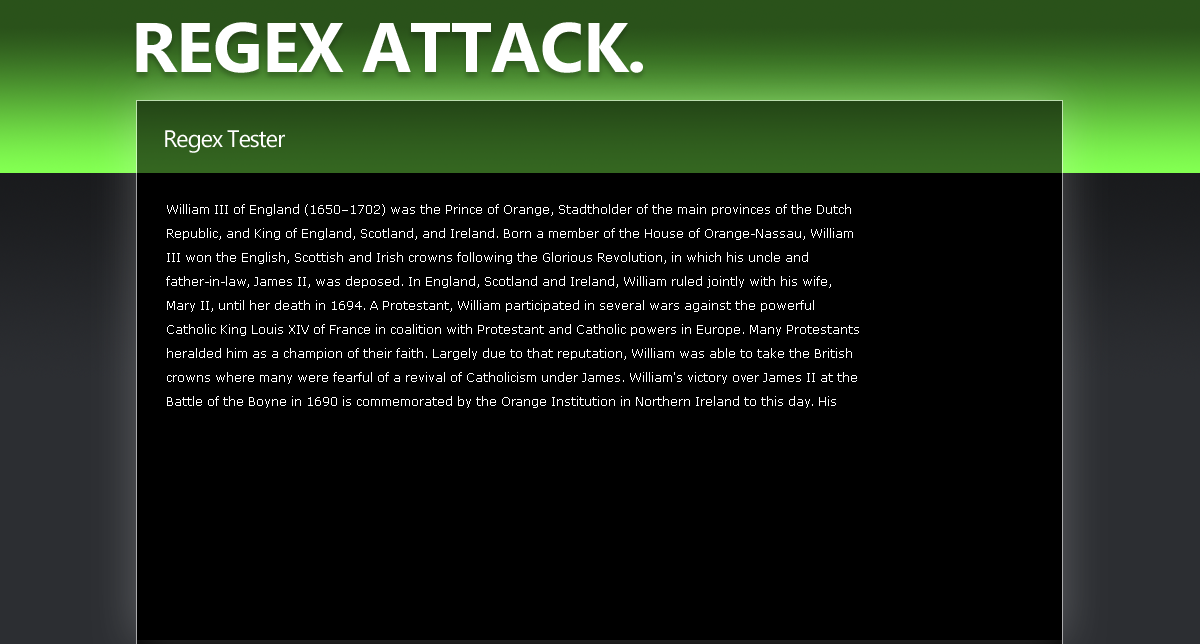
<style>
.page{position:relative;width:1200px;height:644px;background:#000000}
.page>*{position:absolute;margin:0}
.t1{font:70px "MicrosoftNewTaiLue-Bold";letter-spacing:-0.01em;color:#ffffff;text-transform:uppercase}
.t2{font:24px "MicrosoftNewTaiLue";letter-spacing:-0.05em;color:#ffffff}
.t3{font:12px/24px "Verdana";color:#ffffff}
</style>
<div class="page">
<p class="t1" style="left:136px;top:22px;width:507px;height:51px">Regex Attack.</p>
<p class="t2" style="left:165px;top:130px;width:120px;height:23px">Regex Tester</p>
<p class="t3" style="left:166px;top:204px;width:693px;height:204px">William III of England (1650–1702) was the Prince of Orange, Stadtholder of the main provinces of the Dutch<br>Republic, and King of England, Scotland, and Ireland. Born a member of the House of Orange-Nassau, William<br>III won the English, Scottish and Irish crowns following the Glorious Revolution, in which his uncle and<br>father-in-law, James II, was deposed. In England, Scotland and Ireland, William ruled jointly with his wife,<br>Mary II, until her death in 1694. A Protestant, William participated in several wars against the powerful<br>Catholic King Louis XIV of France in coalition with Protestant and Catholic powers in Europe. Many Protestants<br>heralded him as a champion of their faith. Largely due to that reputation, William was able to take the British<br>crowns where many were fearful of a revival of Catholicism under James. William's victory over James II at the<br>Battle of the Boyne in 1690 is commemorated by the Orange Institution in Northern Ireland to this day. His</p>
</div>
